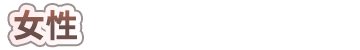
<style>
.page{position:relative;width:360px;height:50px;background:#ffffff}
.page>*{position:absolute;margin:0}
.t1{font:32px "SourceHanSansSC-Bold";color:#73534d;font-weight:bold}
</style>
<div class="page">
<p class="t1" style="left:14px;top:9px;width:63px;height:32px">女性</p>
</div>
